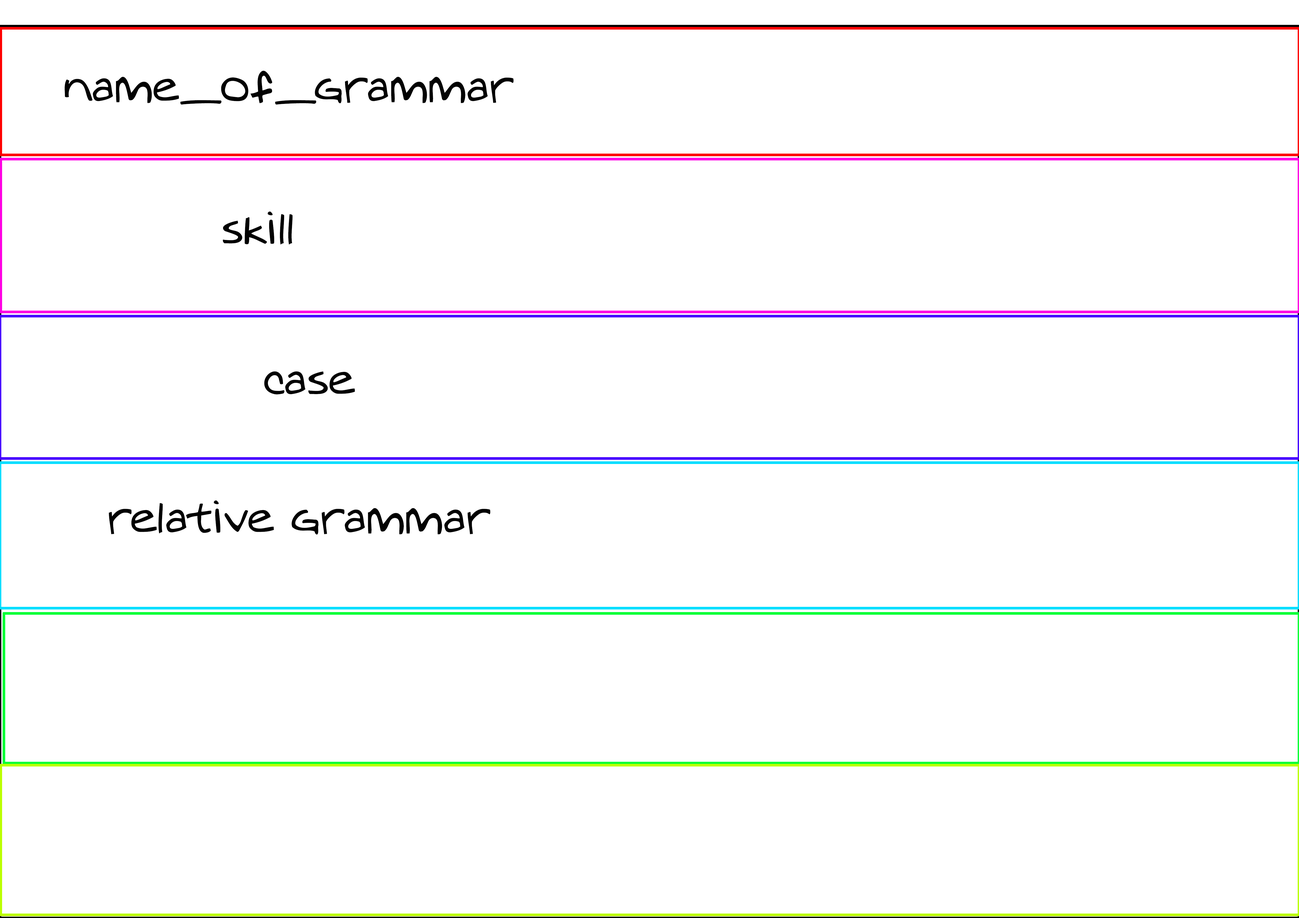
<style>
.page{position:relative;width:1299px;height:918px;background:#ffffff}
.page>*{position:absolute;margin:0}
.t1{font:43.6px "MTOaugie-Regular";color:#020202}
</style>
<div class="page">
<p class="t1" style="left:65px;top:71px;width:449px;height:34px">name_of_grammar</p>
<p class="t1" style="left:223px;top:212px;width:70px;height:33px">skill</p>
<p class="t1" style="left:264px;top:371px;width:91px;height:23px">case</p>
<p class="t1" style="left:109px;top:500px;width:381px;height:35px">relative grammar</p>
</div>
